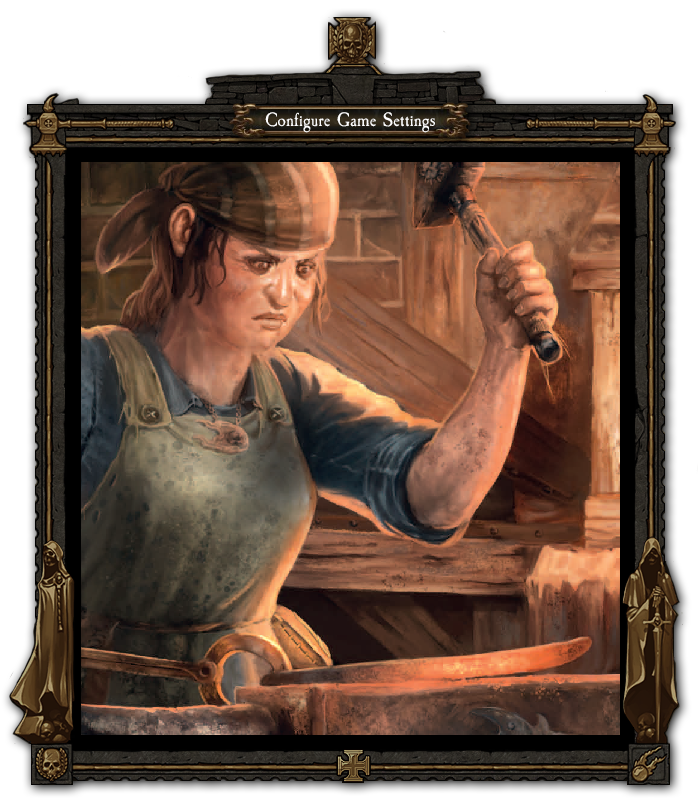
<style>
.page{position:relative;width:700px;height:802px}
.page>*{position:absolute;margin:0}
.t1{font:20px "CaslonAntique";color:#fefefe}
</style>
<div class="page">
<p class="t1" style="left:265px;top:112px;width:170px;height:21px">Configure Game Settings</p>
</div>
